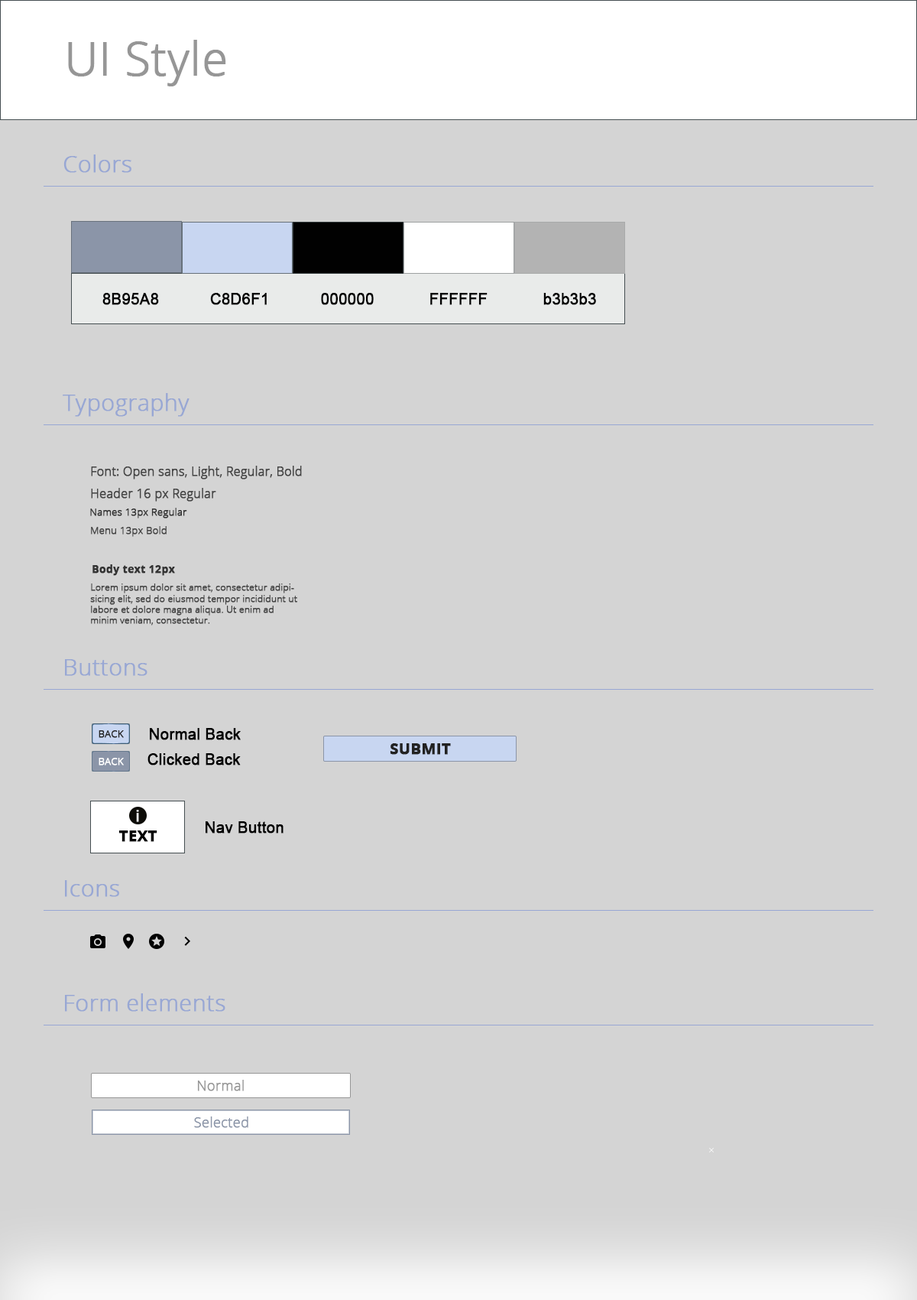
<style>
.page{position:relative;width:917px;height:1300px;background:#d4d4d4}
.page>*{position:absolute;margin:0}
.t1{font:45.9px "OpenSans-Light";color:#969696;font-weight:bold}
.t2{font:22.9px "OpenSans-Light";color:#98a7d4;font-weight:bold}
.t3{font:15.3px "ArialMT";color:#000000;font-weight:bold}
.t4{font:12.2px "OpenSans-Light";color:#454545;font-weight:bold}
.t5{font:9.9px "OpenSans-Light";color:#333333;font-weight:bold}
.t6{font:9.9px "OpenSans-Light";color:#454545;font-weight:bold}
.t7{font:10.7px "OpenSans-Bold";color:#333333;font-weight:bold}
.t8{font:9.2px "OpenSans-Light";color:#454545;font-weight:bold}
.t9{font:9.9px "OpenSans-Light";color:#252525;font-weight:bold}
.t10{font:15.3px "OpenSans-Bold";color:#222222;font-weight:bold}
.t11{font:9.9px "OpenSans-Light";color:#ffffff;font-weight:bold}
.t12{font:15.3px "ArialMT";color:#ffffff;font-weight:bold}
.t13{font:15.3px "OpenSans-Bold";color:#010101;font-weight:bold}
.t14{font:13.8px "OpenSans-Light";color:#969696;font-weight:bold}
.t15{font:13.8px "OpenSans-Light";color:#8b95a8;font-weight:bold}
</style>
<div class="page">
<p class="t1" style="left:68px;top:40px;width:158px;height:46px">UI Style</p>
<p class="t2" style="left:63px;top:154px;width:69px;height:19px">Colors</p>
<p class="t3" style="left:102px;top:293px;width:57px;height:12px">8B95A8</p>
<p class="t3" style="left:210px;top:293px;width:57px;height:12px">C8D6F1</p>
<p class="t3" style="left:321px;top:293px;width:53px;height:12px">000000</p>
<p class="t3" style="left:430px;top:293px;width:58px;height:12px">FFFFFF</p>
<p class="t3" style="left:544px;top:293px;width:52px;height:12px">b3b3b3</p>
<p class="t2" style="left:63px;top:393px;width:127px;height:24px">Typography</p>
<p class="t4" style="left:91px;top:466px;width:211px;height:13px">Font: Open sans, Light, Regular, Bold</p>
<p class="t4" style="left:91px;top:488px;width:125px;height:14px">Header 16 px Regular</p>
<p class="t5" style="left:90px;top:508px;width:97px;height:10px">Names 13px Regular</p>
<p class="t6" style="left:91px;top:526px;width:76px;height:11px">Menu 13px Bold</p>
<p class="t7" style="left:93px;top:564px;width:82px;height:12px">Body text 12px</p>
<p class="t8" style="left:90px;top:583px;width:207px;height:42px">Lorem ipsum dolor sit amet, consectetur adipisicing elit, sed do eiusmod tempor incididunt ut labore et dolore magna aliqua. Ut enim ad minim veniam, consectetur.</p>
<p class="t2" style="left:65px;top:659px;width:83px;height:17px">Buttons</p>
<p class="t9" style="left:99px;top:730px;width:25px;height:8px">BACK</p>
<p class="t3" style="left:150px;top:728px;width:91px;height:12px">Normal Back</p>
<p class="t10" style="left:390px;top:743px;width:61px;height:12px">SUBMIT</p>
<p class="t11" style="left:99px;top:758px;width:25px;height:7px">BACK</p>
<p class="t3" style="left:148px;top:753px;width:93px;height:12px">Clicked Back</p>
<p class="t12" style="left:136px;top:810px;width:3px;height:12px">i</p>
<p class="t3" style="left:206px;top:821px;width:78px;height:12px">Nav Button</p>
<p class="t13" style="left:119px;top:830px;width:38px;height:12px">TEXT</p>
<p class="t2" style="left:65px;top:880px;width:54px;height:17px">Icons</p>
<p class="t2" style="left:65px;top:993px;width:161px;height:18px">Form elements</p>
<p class="t14" style="left:197px;top:1080px;width:47px;height:11px">Normal</p>
<p class="t15" style="left:194px;top:1116px;width:54px;height:12px">Selected</p>
</div>
